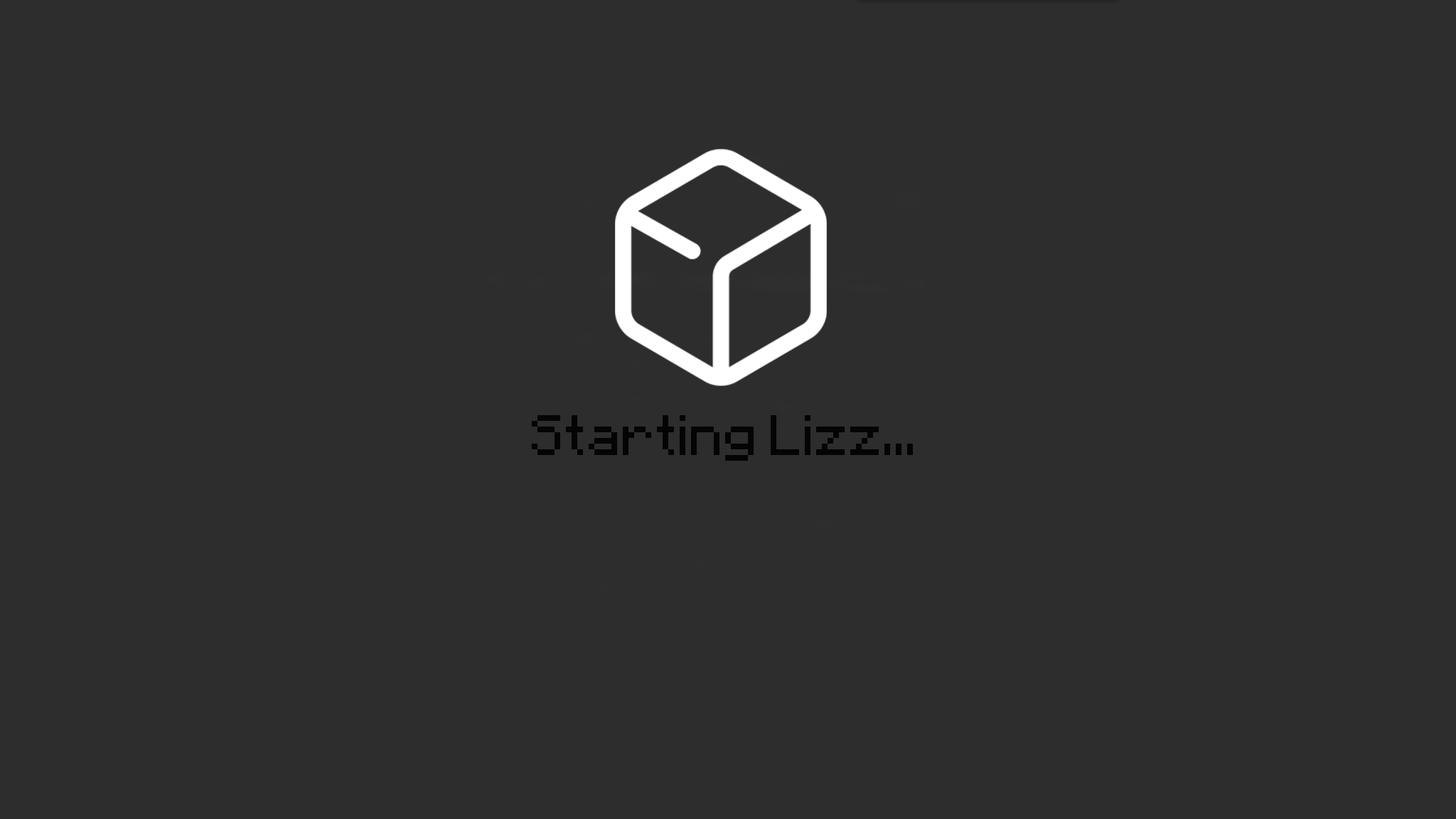
<style>
.page{position:relative;width:1456px;height:819px;background:#2d2d2d}
.page>*{position:absolute;margin:0}
.t1{font:45.5px "MinecraftAE-Pixel";color:#040404}
</style>
<div class="page">
<p class="t1" style="left:532px;top:415px;width:381px;height:46px">Starting Lizz...</p>
</div>
